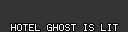
<style>
.page{position:relative;width:128px;height:32px;background:#333333}
.page>*{position:absolute;margin:0}
.t1{font:8px "Terminal";color:#ffffff}
</style>
<div class="page">
<p class="t1" style="left:11px;top:24px;width:107px;height:7px">HOTEL GHOST IS LIT</p>
</div>
